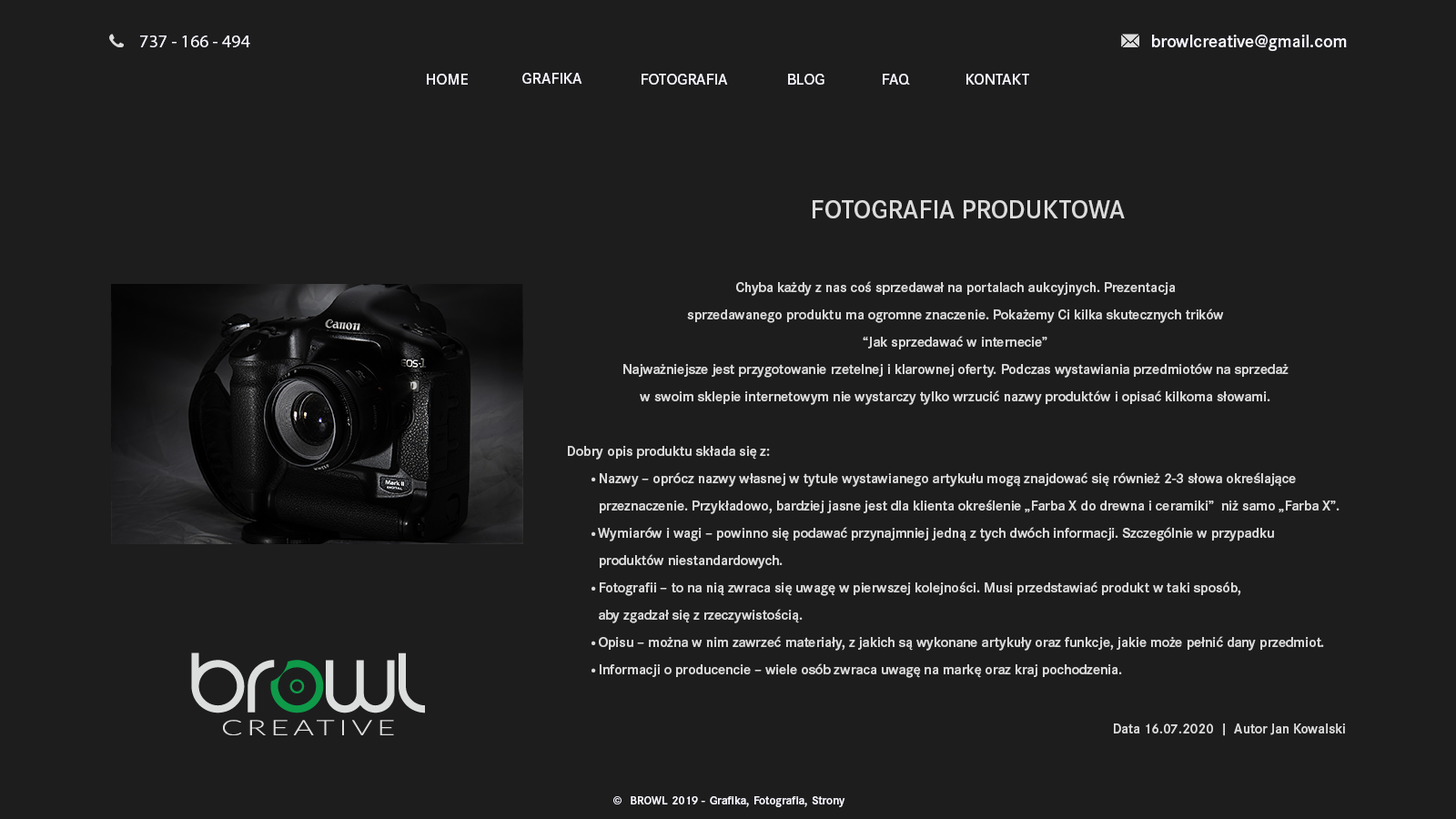
<style>
.page{position:relative;width:1456px;height:819px;background:#1d1d1e}
.page>*{position:absolute;margin:0}
.t1{font:18.2px "MyriadPro-Regular";color:#f7f7ff}
.t2{font:18.2px "CorporateSPro-Demi";color:#f7f7ff}
.t3{font:16.2px "CorporateSPro-Demi";color:#f7f7ff}
.t4{font:26.5px "CorporateSPro-Demi";color:#dcdcdc;text-transform:uppercase}
.t5{font:14.6px/27.3px "CorporateSPro-Demi";color:#dcdcdc}
.t6{font:14.6px/27.3px "BDColonius";color:#dcdcdc}
.t7{font:14.1px "CorporateSPro-Demi";color:#dcdcdc}
.t8{font:12px "CorporateSPro-Demi";color:#f7f7ff}
</style>
<div class="page">
<p class="t1" style="left:140px;top:35px;width:110px;height:12px">737 - 166 - 494</p>
<p class="t2" style="left:1152px;top:35px;width:195px;height:16px">browlcreative@gmail.com</p>
<p class="t3" style="left:427px;top:74px;width:41px;height:11px;text-align:justify">HOME<br>v</p>
<p class="t3" style="left:522px;top:73px;width:60px;height:11px">GRAFIKA</p>
<p class="t3" style="left:642px;top:74px;width:86px;height:11px">FOTOGRAFIA</p>
<p class="t3" style="left:788px;top:74px;width:36px;height:11px">BLOG</p>
<p class="t3" style="left:883px;top:74px;width:27px;height:11px">FAQ</p>
<p class="t3" style="left:966px;top:74px;width:63px;height:11px">KONTAKT</p>
<p class="t4" style="left:813px;top:200px;width:312px;height:18px">Fotografia produktowa</p>
<p class="t5" style="left:568px;top:281px;width:772px;height:397px;text-align:center">Chyba każdy z nas coś sprzedawał na portalach aukcyjnych. Prezentacja <br>sprzedawanego produktu ma ogromne znaczenie. Pokażemy Ci kilka skutecznych trików <br>“Jak sprzedawać w internecie” <br>Najważniejsze jest przygotowanie rzetelnej i klarownej oferty. Podczas wystawiania przedmiotów na sprzedaż <br>w swoim sklepie internetowym nie wystarczy tylko wrzucić nazwy produktów i opisać kilkoma słowami.<br><br>Dobry opis produktu składa się z:<br><span class="t6"> • </span>Nazwy – oprócz nazwy własnej w tytule wystawianego artykułu mogą znajdować się również 2-3 słowa określające <br>   przeznaczenie. Przykładowo, bardziej jasne jest dla klienta określenie „Farba X do drewna i ceramiki”  niż samo „Farba X”.<br><span class="t6"> • </span>Wymiarów i wagi – powinno się podawać przynajmniej jedną z tych dwóch informacji. Szczególnie w przypadku <br>   produktów niestandardowych.<br><span class="t6"> • </span>Fotografii – to na nią zwraca się uwagę w pierwszej kolejności. Musi przedstawiać produkt w taki sposób, <br>   aby zgadzał się z rzeczywistością.<br><span class="t6"> • </span>Opisu – można w nim zawrzeć materiały, z jakich są wykonane artykuły oraz funkcje, jakie może pełnić dany przedmiot.  <br><span class="t6"> • </span>Informacji o producencie – wiele osób zwraca uwagę na markę oraz kraj pochodzenia.</p>
<p class="t7" style="left:1114px;top:723px;width:231px;height:13px">Data 16.07.2020  |  Autor Jan Kowalski</p>
<p class="t8" style="left:613px;top:796px;width:232px;height:11px;text-align:justify">©  BROWL 2019 - Grafika, Fotografia, Strony www<br>v</p>
</div>
